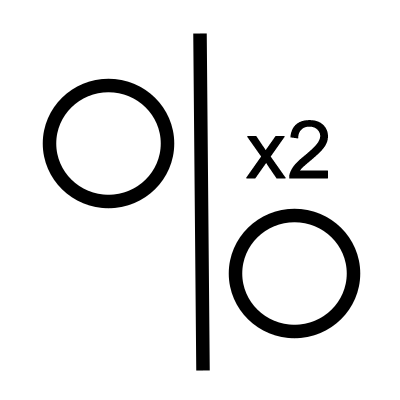
<style>
.page{position:relative;width:400px;height:400px;background:#ffffff}
.page>*{position:absolute;margin:0}
.t1{font:80px "ArialMT";letter-spacing:-0.011em;color:#000000;font-weight:bold}
</style>
<div class="page">
<p class="t1" style="left:246px;top:120px;width:82px;height:59px">x2</p>
</div>
